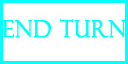
<style>
.page{position:relative;width:128px;height:64px;background:#ffffff}
.page>*{position:absolute;margin:0}
.t1{font:22.7px "FelixTitlingMT";letter-spacing:0.04em;color:#00fff6;font-weight:bold;scale:0.93 1}
</style>
<div class="page">
<p class="t1" style="left:2px;top:19px;width:124px;height:19px">End Turn</p>
</div>
